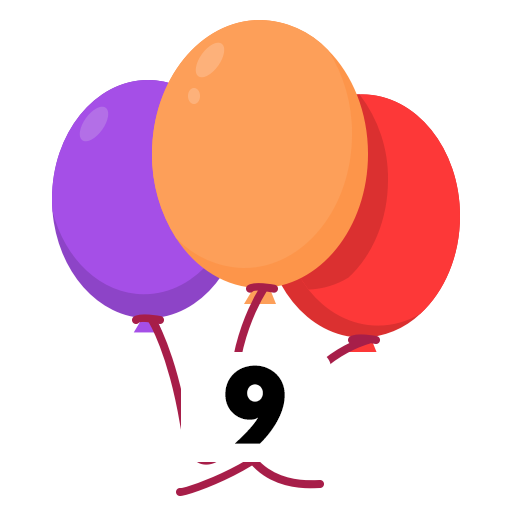
<style>
.page{position:relative;width:512px;height:512px;background:#ffffff}
.page>*{position:absolute;margin:0}
.t1{font:116.4px "Sen-ExtraBold";letter-spacing:-0.075em;color:#000000}
</style>
<div class="page">
<p class="t1" style="left:225px;top:365px;width:60px;height:79px">9</p>
</div>
